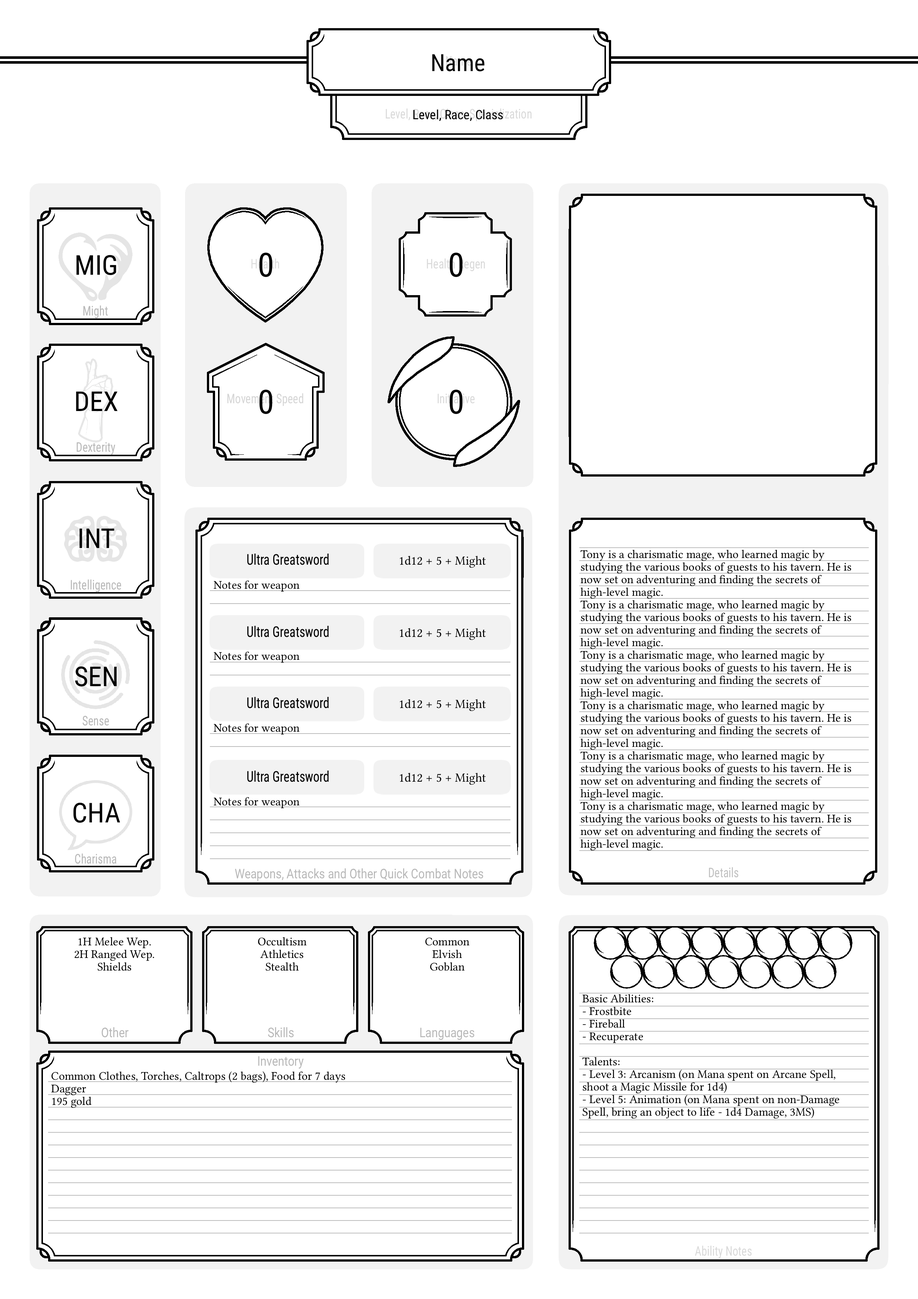
<style>
.page{position:relative;width:918px;height:1299px;background:#ffffff}
.page>*{position:absolute;margin:0}
.t1{font:23.7px "RobotoCondensed-Regular";color:#000000}
.t2{font:13px "RobotoCondensed-Regular";color:#000000}
.t3{font:27.4px "RobotoCondensed-Regular";color:#000000}
.t4{font:33.3px "RobotoCondensed-Regular";color:#000000}
.t5{font:13.3px "RobotoCondensed-Regular";color:#b8b8b8;scale:0.85 1}
.t6{font:14.8px "RobotoCondensed-Regular";color:#000000;scale:0.85 1}
.t7{font:12.6px "LinLibertine";color:#000000}
.t8{font:11.8px/12.6px "LinLibertine";color:#000000}
.t9{font:11.8px "LinLibertine";color:#000000}
.t10{font:13.3px "Roboto-Regular";color:#b8b8b8;scale:0.85 1}
.t11{font:13.3px "RobotoCondensed-Regular";color:#c0c0c0;scale:0.85 1}
.t12{font:13.3px "RobotoCondensed-Regular";color:#d9d9d9;scale:0.85 1}
</style>
<div class="page">
<p class="t1" style="left:432px;top:54px;width:53px;height:17px">Name</p>
<p class="t2" style="left:413px;top:109px;width:90px;height:12px">Level, Race, Class</p>
<p class="t3" style="left:76px;top:255px;width:40px;height:20px">MIG</p>
<p class="t4" style="left:260px;top:252px;width:12px;height:25px">0</p>
<p class="t4" style="left:450px;top:252px;width:13px;height:25px">0</p>
<p class="t5" style="left:83px;top:305px;width:25px;height:13px">Might</p>
<p class="t4" style="left:260px;top:389px;width:12px;height:25px">0</p>
<p class="t4" style="left:450px;top:389px;width:13px;height:25px">0</p>
<p class="t3" style="left:76px;top:391px;width:42px;height:20px">DEX</p>
<p class="t5" style="left:77px;top:442px;width:39px;height:13px">Dexterity</p>
<p class="t3" style="left:79px;top:528px;width:35px;height:20px">INT</p>
<p class="t6" style="left:247px;top:553px;width:82px;height:12px">Ultra Greatsword</p>
<p class="t7" style="left:400px;top:556px;width:86px;height:12px">1d12 + 5 + Might</p>
<p class="t8" style="left:581px;top:549px;width:271px;height:301px">Tony is a charismatic mage, who learned magic by studying the various books of guests to his tavern. He is now set on adventuring and finding the secrets of high-level magic.<br>Tony is a charismatic mage, who learned magic by studying the various books of guests to his tavern. He is now set on adventuring and finding the secrets of high-level magic.<br>Tony is a charismatic mage, who learned magic by studying the various books of guests to his tavern. He is now set on adventuring and finding the secrets of high-level magic.<br>Tony is a charismatic mage, who learned magic by studying the various books of guests to his tavern. He is now set on adventuring and finding the secrets of high-level magic.<br>Tony is a charismatic mage, who learned magic by studying the various books of guests to his tavern. He is now set on adventuring and finding the secrets of high-level magic.<br>Tony is a charismatic mage, who learned magic by studying the various books of guests to his tavern. He is now set on adventuring and finding the secrets of high-level magic.</p>
<p class="t5" style="left:71px;top:579px;width:50px;height:13px">Intelligence</p>
<p class="t9" style="left:214px;top:580px;width:86px;height:12px">Notes for weapon</p>
<p class="t6" style="left:247px;top:626px;width:82px;height:11px">Ultra Greatsword</p>
<p class="t7" style="left:400px;top:628px;width:86px;height:12px">1d12 + 5 + Might</p>
<p class="t9" style="left:214px;top:651px;width:86px;height:12px">Notes for weapon</p>
<p class="t3" style="left:75px;top:666px;width:42px;height:20px">SEN</p>
<p class="t6" style="left:247px;top:697px;width:82px;height:11px">Ultra Greatsword</p>
<p class="t7" style="left:400px;top:699px;width:86px;height:12px">1d12 + 5 + Might</p>
<p class="t5" style="left:83px;top:716px;width:26px;height:10px">Sense</p>
<p class="t9" style="left:214px;top:723px;width:86px;height:12px">Notes for weapon</p>
<p class="t6" style="left:247px;top:770px;width:82px;height:12px">Ultra Greatsword</p>
<p class="t7" style="left:400px;top:773px;width:86px;height:12px">1d12 + 5 + Might</p>
<p class="t9" style="left:214px;top:797px;width:86px;height:11px">Notes for weapon</p>
<p class="t3" style="left:73px;top:802px;width:47px;height:21px">CHA</p>
<p class="t5" style="left:75px;top:853px;width:42px;height:11px">Charisma</p>
<p class="t10" style="left:235px;top:868px;width:249px;height:13px">Weapons, Attacks and Other Quick Combat Notes</p>
<p class="t11" style="left:709px;top:867px;width:30px;height:10px">Details</p>
<p class="t8" style="left:74px;top:937px;width:80px;height:34px;text-align:center">1H Melee Wep.<br>2H Ranged Wep.<br>Shields</p>
<p class="t8" style="left:258px;top:937px;width:49px;height:34px;text-align:center">Occultism<br>Athletics<br>Stealth</p>
<p class="t8" style="left:425px;top:937px;width:44px;height:34px;text-align:center">Common<br>Elvish<br>Goblan</p>
<p class="t8" style="left:582px;top:994px;width:258px;height:124px">Basic Abilities:<br>- Frostbite<br>- Fireball<br>- Recuperate<br><br>Talents:<br>- Level 3: Arcanism (on Mana spent on Arcane Spell, shoot a Magic Missile for 1d4)<br>- Level 5: Animation (on Mana spent on non-Damage Spell, bring an object to life - 1d4 Damage, 3MS)</p>
<p class="t10" style="left:101px;top:1027px;width:27px;height:10px">Other</p>
<p class="t10" style="left:268px;top:1027px;width:26px;height:10px">Skills</p>
<p class="t10" style="left:420px;top:1027px;width:55px;height:13px">Languages</p>
<p class="t10" style="left:258px;top:1056px;width:46px;height:12px">Inventory</p>
<p class="t8" style="left:51px;top:1071px;width:294px;height:37px">Common Clothes, Torches, Caltrops (2 bags), Food for 7 days<br>Dagger<br>195 gold</p>
<p class="t12" style="left:695px;top:1245px;width:57px;height:13px">Ability Notes</p>
</div>
